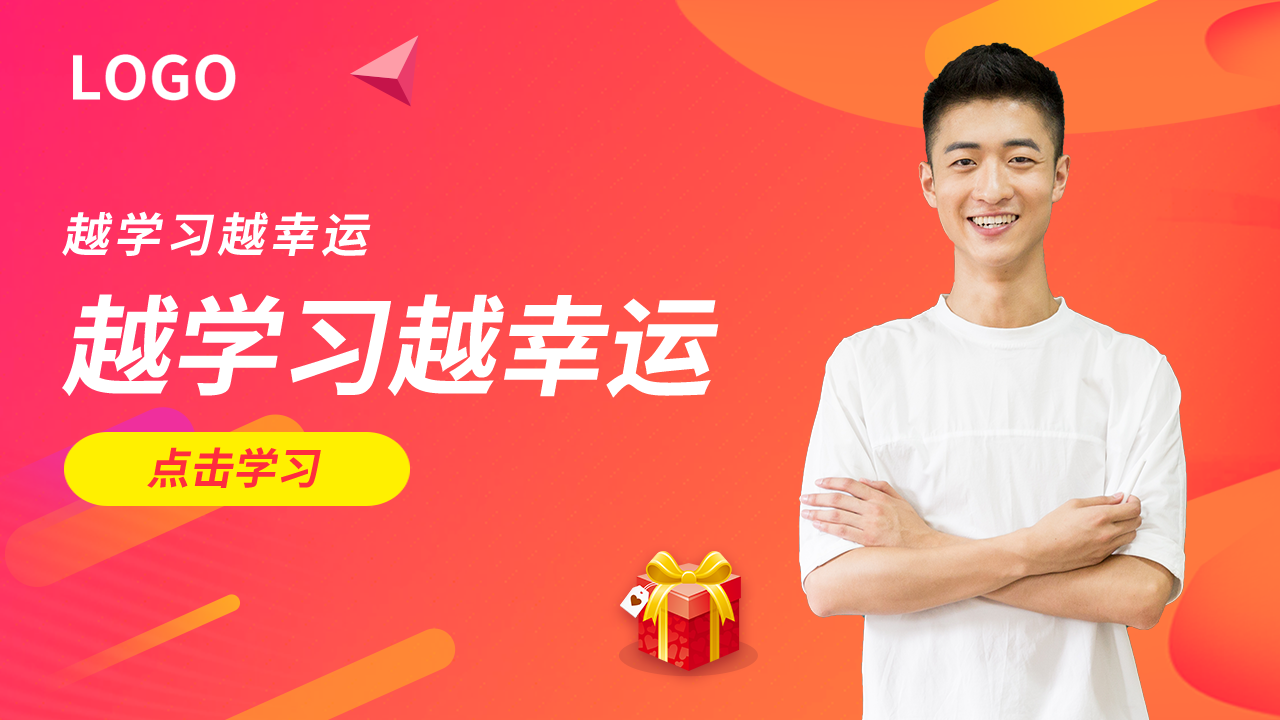
<style>
.page{position:relative;width:1280px;height:720px}
.page>*{position:absolute;margin:0}
.t1{font:47.2px "SourceHanSansCN-Bold";letter-spacing:0.1em;color:#ffffff;font-style:italic}
.t2{font:108.7px "SourceHanSansCN-Bold";color:#ffffff;font-style:italic}
.t3{font:43.3px "SourceHanSansCN-Bold";color:#ff2c3e;font-style:italic}
</style>
<div class="page">
<p class="t1" style="left:62px;top:211px;width:309px;height:46px">越学习越幸运</p>
<p class="t2" style="left:62px;top:293px;width:657px;height:105px">越学习越幸运</p>
<p class="t3" style="left:147px;top:447px;width:174px;height:41px">点击学习</p>
</div>
